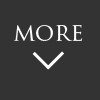
<style>
.page{position:relative;width:100px;height:100px;background:#333333}
.page>*{position:absolute;margin:0}
.t1{font:24px "TrajanPro-Regular";color:#ffffff}
</style>
<div class="page">
<p class="t1" style="left:14px;top:25px;width:69px;height:16px">more</p>
</div>
